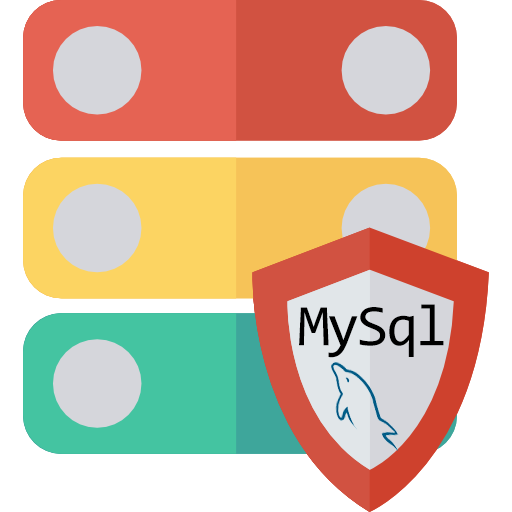
<style>
.page{position:relative;width:512px;height:512px;background:#ffffff}
.page>*{position:absolute;margin:0}
.t1{font:59px "Consolas";letter-spacing:-0.05em;color:#000000}
</style>
<div class="page">
<p class="t1" style="left:299px;top:304px;width:145px;height:54px">MySql</p>
</div>
